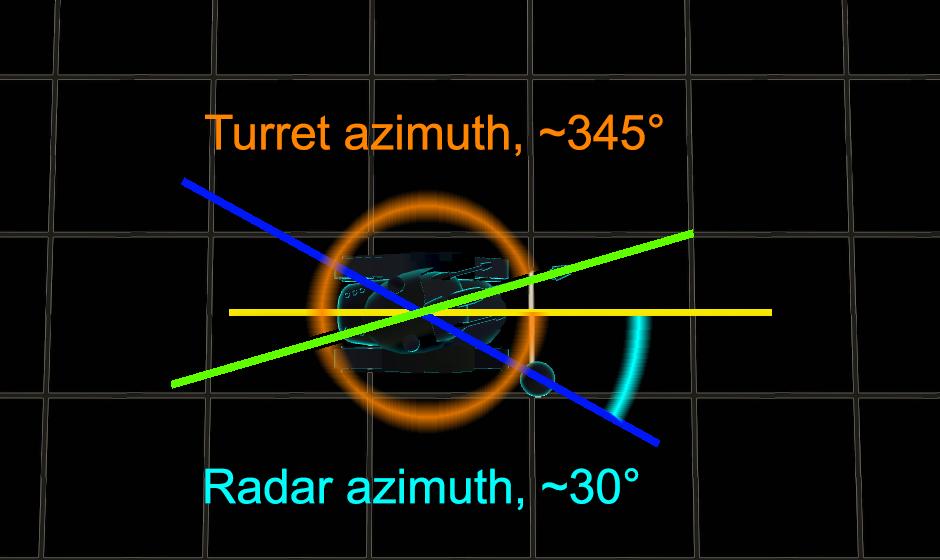
<style>
.page{position:relative;width:940px;height:560px;background:#010102}
.page>*{position:absolute;margin:0}
.t1{font:48px "ArialMT";color:#ff8400}
.t2{font:48px "ArialMT";color:#00fffc}
</style>
<div class="page">
<p class="t1" style="left:205px;top:114px;width:458px;height:43px">Turret azimuth, ~345°</p>
<p class="t2" style="left:205px;top:468px;width:434px;height:43px">Radar azimuth, ~30°</p>
</div>
